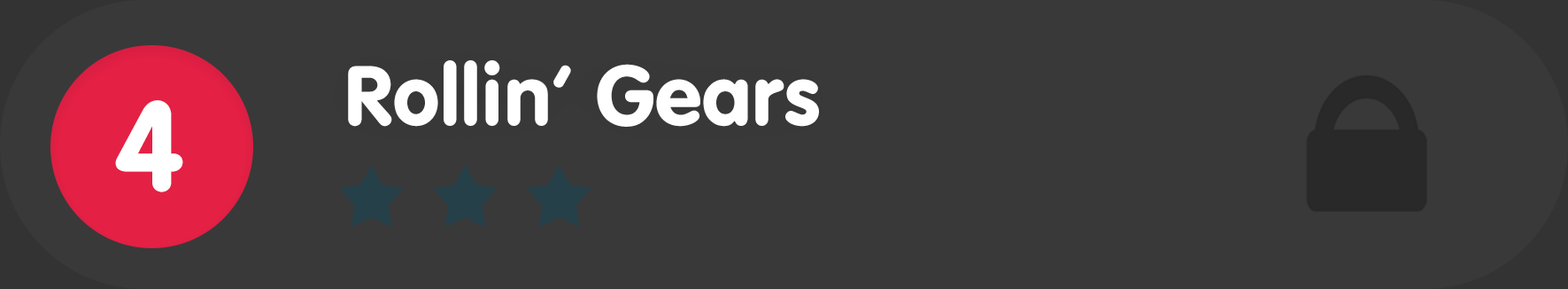
<style>
.page{position:relative;width:1568px;height:289px;background:#393939}
.page>*{position:absolute;margin:0}
.t1{font:88.5px "VAGRundschriftD";color:#ffffff}
.t2{font:132.8px "VAGRundschriftD";color:#ffffff}
</style>
<div class="page">
<p class="t1" style="left:348px;top:60px;width:471px;height:67px">Rollin’ Gears</p>
<p class="t2" style="left:115px;top:100px;width:68px;height:92px">4</p>
</div>
